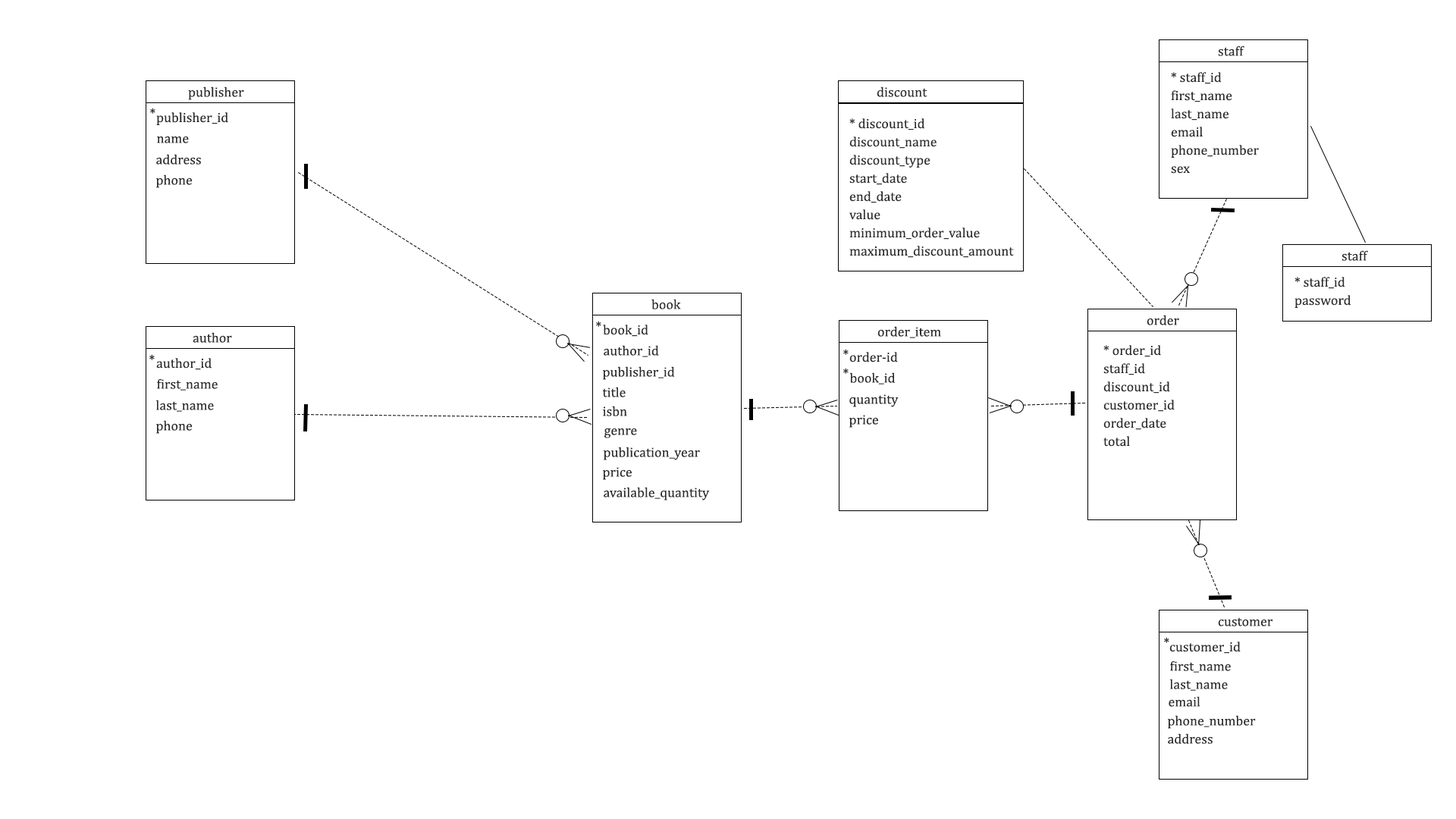
<style>
.page{position:relative;width:1456px;height:819px;background:#ffffff}
.page>*{position:absolute;margin:0}
.t1{font:13.6px "Cambria";color:#2c2c2c}
.t2{font:13.6px/18.2px "Cambria";color:#2c2c2c}
</style>
<div class="page">
<p class="t1" style="left:1218px;top:45px;width:26px;height:11px">staff</p>
<p class="t2" style="left:1171px;top:72px;width:88px;height:102px">* staff_id<br>first_name<br>last_name<br>email<br>phone_number<br>sex</p>
<p class="t1" style="left:188px;top:86px;width:56px;height:14px">publisher</p>
<p class="t1" style="left:877px;top:86px;width:50px;height:11px">discount</p>
<p class="t1" style="left:150px;top:108px;width:5px;height:6px">*</p>
<p class="t1" style="left:156px;top:112px;width:72px;height:13px">publisher_id</p>
<p class="t2" style="left:849px;top:118px;width:165px;height:140px">* discount_id<br>discount_name<br>discount_type<br>start_date<br>end_date<br>value<br>minimum_order_value<br>maximum_discount_amount</p>
<p class="t1" style="left:157px;top:136px;width:32px;height:7px">name</p>
<p class="t1" style="left:156px;top:154px;width:45px;height:11px">address</p>
<p class="t1" style="left:156px;top:174px;width:37px;height:14px">phone</p>
<p class="t1" style="left:1341px;top:250px;width:27px;height:11px">staff</p>
<p class="t2" style="left:1294px;top:277px;width:57px;height:31px">* staff_id<br>password</p>
<p class="t1" style="left:651px;top:299px;width:30px;height:10px">book</p>
<p class="t1" style="left:1147px;top:315px;width:32px;height:10px">order</p>
<p class="t1" style="left:596px;top:321px;width:5px;height:6px">*</p>
<p class="t1" style="left:603px;top:325px;width:45px;height:12px">book_id</p>
<p class="t1" style="left:877px;top:326px;width:64px;height:12px">order_item</p>
<p class="t1" style="left:193px;top:332px;width:39px;height:11px">author</p>
<p class="t1" style="left:604px;top:345px;width:55px;height:12px">author_id</p>
<p class="t1" style="left:843px;top:349px;width:6px;height:6px">*</p>
<p class="t1" style="left:849px;top:352px;width:49px;height:10px">order-id</p>
<p class="t2" style="left:1103px;top:345px;width:72px;height:102px">* order_id<br>staff_id<br>discount_id<br>customer_id<br>order_date<br>total</p>
<p class="t1" style="left:149px;top:354px;width:6px;height:6px">*</p>
<p class="t1" style="left:156px;top:358px;width:56px;height:12px">author_id</p>
<p class="t1" style="left:603px;top:366px;width:72px;height:14px">publisher_id</p>
<p class="t1" style="left:843px;top:368px;width:6px;height:6px">*</p>
<p class="t1" style="left:849px;top:372px;width:46px;height:12px">book_id</p>
<p class="t1" style="left:157px;top:378px;width:61px;height:13px">first_name</p>
<p class="t1" style="left:602px;top:387px;width:24px;height:10px">title</p>
<p class="t1" style="left:156px;top:400px;width:58px;height:12px">last_name</p>
<p class="t1" style="left:849px;top:394px;width:50px;height:13px">quantity</p>
<p class="t1" style="left:603px;top:406px;width:24px;height:10px">isbn</p>
<p class="t1" style="left:156px;top:420px;width:37px;height:14px">phone</p>
<p class="t1" style="left:849px;top:415px;width:29px;height:13px">price</p>
<p class="t1" style="left:604px;top:428px;width:33px;height:10px">genre</p>
<p class="t1" style="left:604px;top:447px;width:96px;height:13px">publication_year</p>
<p class="t1" style="left:603px;top:467px;width:29px;height:13px">price</p>
<p class="t1" style="left:604px;top:487px;width:106px;height:13px">available_quantity</p>
<p class="t1" style="left:1218px;top:617px;width:54px;height:9px">customer</p>
<p class="t1" style="left:1164px;top:637px;width:5px;height:6px">*</p>
<p class="t1" style="left:1169px;top:642px;width:72px;height:12px">customer_id</p>
<p class="t2" style="left:1170px;top:660px;width:61px;height:31px">first_name<br>last_name</p>
<p class="t1" style="left:1169px;top:696px;width:31px;height:11px">email</p>
<p class="t2" style="left:1168px;top:715px;width:88px;height:29px">phone_number<br>address</p>
</div>
